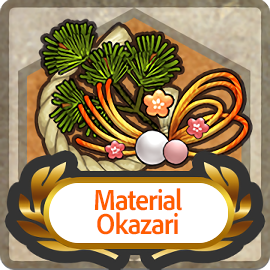
<style>
.page{position:relative;width:270px;height:270px}
.page>*{position:absolute;margin:0}
.t1{font:30px/24px "AdobeClean-Bold";letter-spacing:-0.04em;color:#ff5d00;scale:0.9 1}
</style>
<div class="page">
<p class="t1" style="left:94px;top:188px;width:88px;height:47px;text-align:center">Material<br>Okazari</p>
</div>
